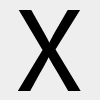
<style>
.page{position:relative;width:100px;height:100px;background:#eeeeee}
.page>*{position:absolute;margin:0}
.t1{font:120px "MyriadPro-Regular";color:#000000}
</style>
<div class="page">
<p class="t1" style="left:18px;top:10px;width:63px;height:81px">X</p>
</div>
